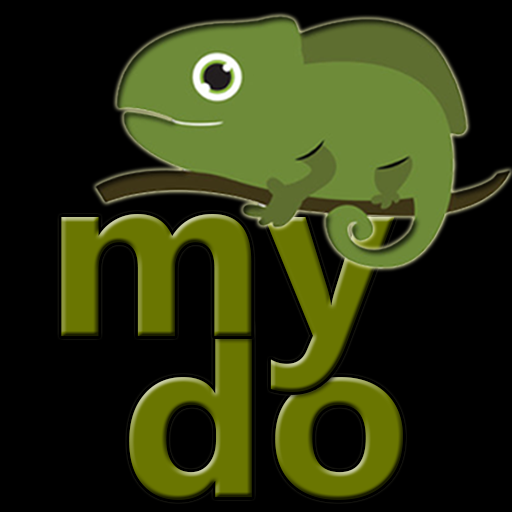
<style>
.page{position:relative;width:512px;height:512px;background:#000000}
.page>*{position:absolute;margin:0}
.t1{font:238.3px "MicrosoftPhagsPa-Bold";color:#6a7601}
.t2{font:234px "MicrosoftPhagsPa-Bold";color:#6a7601}
</style>
<div class="page">
<p class="t1" style="left:61px;top:214px;width:334px;height:178px">my</p>
<p class="t2" style="left:129px;top:323px;width:274px;height:177px">do</p>
</div>
